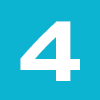
<style>
.page{position:relative;width:100px;height:100px;background:#0cb4d2}
.page>*{position:absolute;margin:0}
.t1{font:85px "AllumiStdExtended-ExtraBold";color:#ffffff}
</style>
<div class="page">
<p class="t1" style="left:20px;top:21px;width:60px;height:60px">4</p>
</div>
